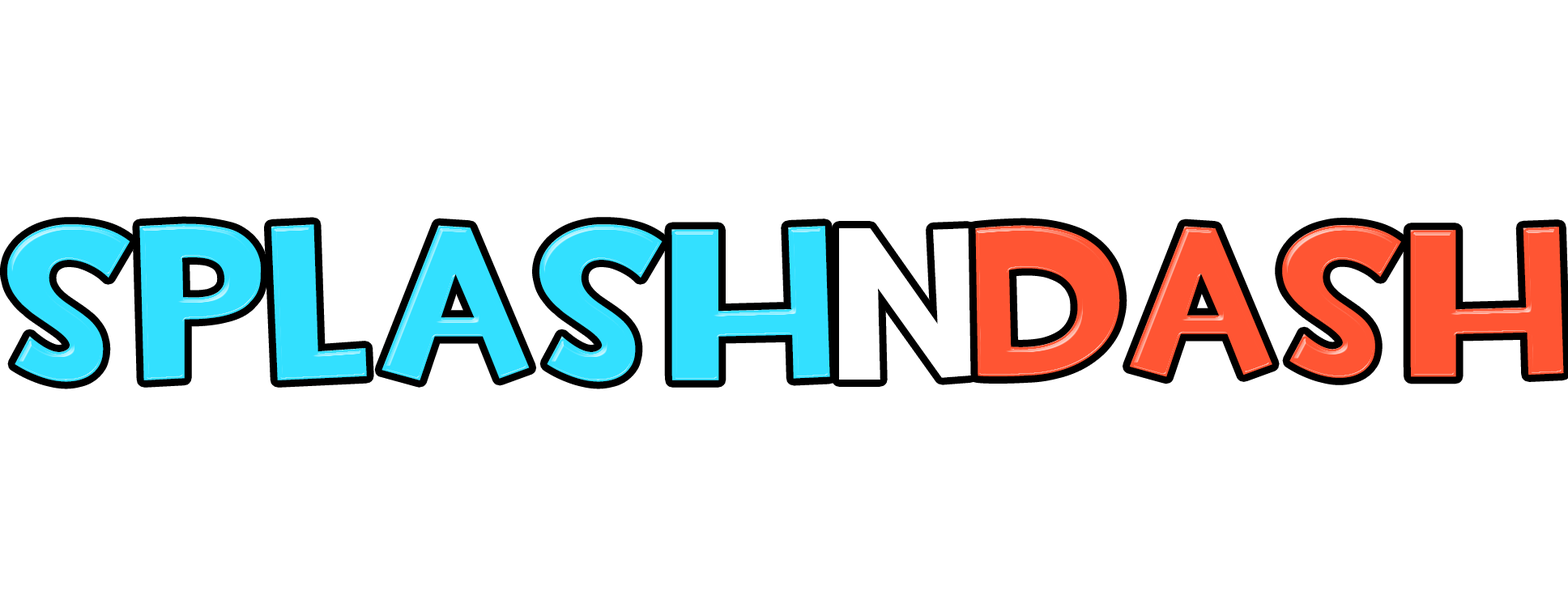
<style>
.page{position:relative;width:1568px;height:590px;background:#ffffff}
.page>*{position:absolute;margin:0}
.t1{font:220.8px "TF2Build";color:#33e0ff}
.t2{font:216.1px "TF2Build";color:#ffffff}
.t3{font:214.5px "TF2Build";color:#ff5533}
</style>
<div class="page">
<p class="t1" style="left:7px;top:224px;width:823px;height:158px">SPLASH</p>
<p class="t2" style="left:839px;top:228px;width:132px;height:152px">N</p>
<p class="t3" style="left:974px;top:225px;width:590px;height:153px">DASH</p>
</div>
